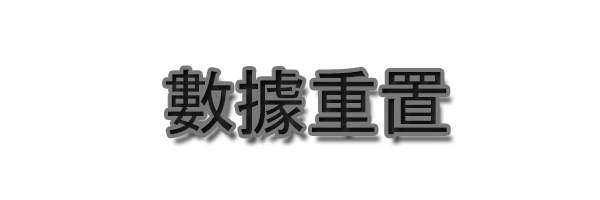
<style>
.page{position:relative;width:600px;height:200px;background:#ffffff}
.page>*{position:absolute;margin:0}
.t1{font:72px "MS-Gothic";color:#161616}
</style>
<div class="page">
<p class="t1" style="left:166px;top:69px;width:281px;height:66px">數據重置</p>
</div>
